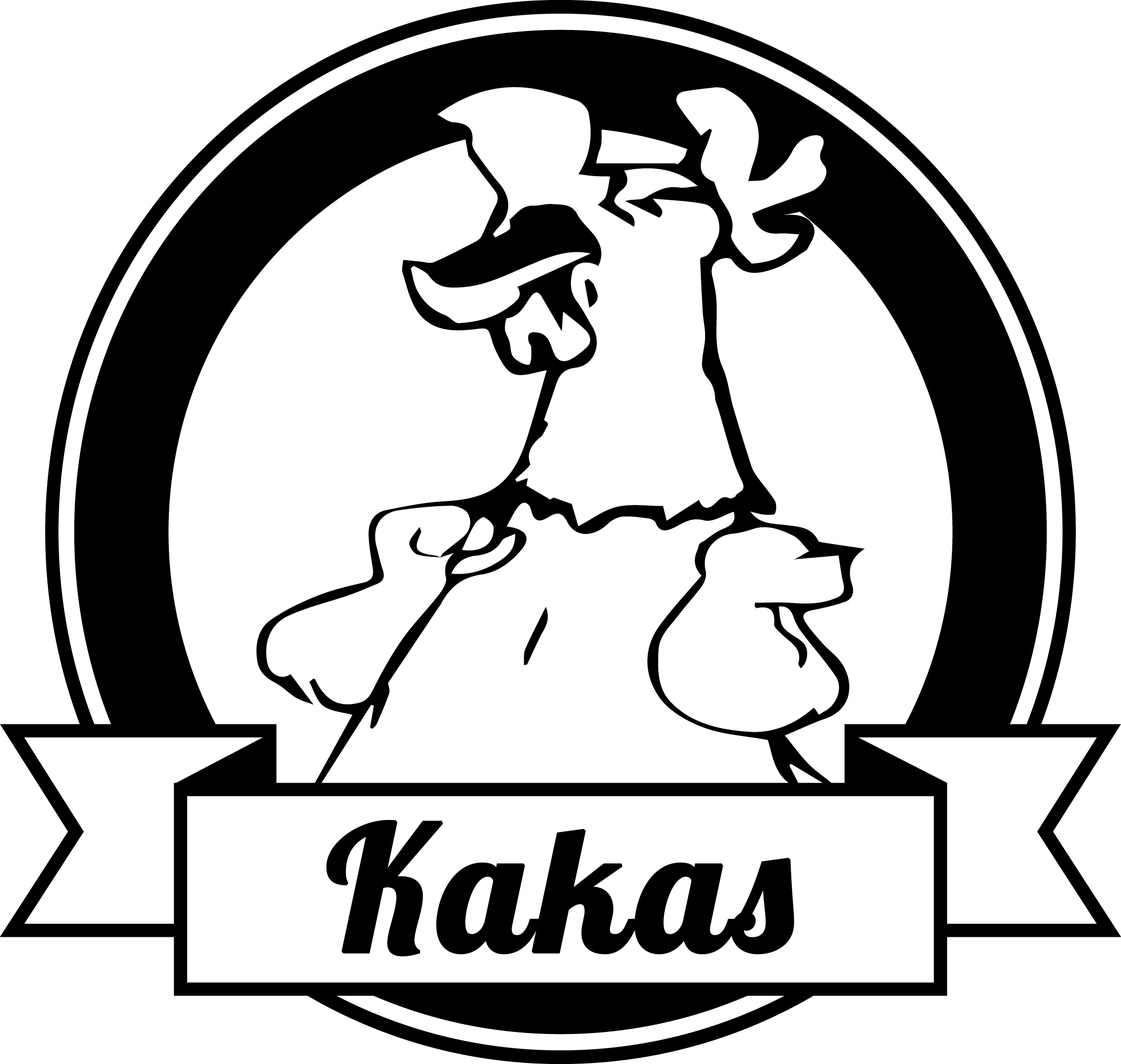
<style>
.page{position:relative;width:1121px;height:1064px;background:#ffffff}
.page>*{position:absolute;margin:0}
.t1{font:172.9px "Lobster1.4";letter-spacing:0.025em;color:#000000;font-weight:bold}
</style>
<div class="page">
<p class="t1" style="left:326px;top:820px;width:468px;height:137px">Kakas</p>
</div>
